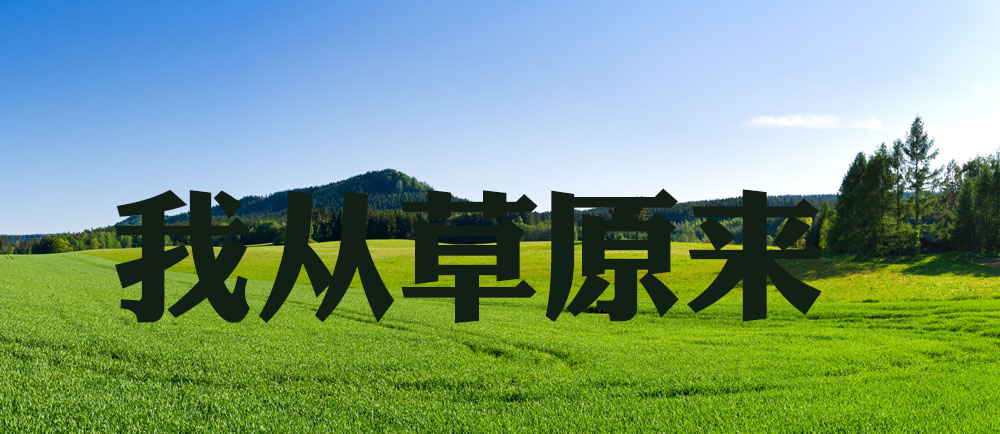
<style>
.page{position:relative;width:1000px;height:434px}
.page>*{position:absolute;margin:0}
.t1{font:143px "DFPLiJinHeiW8";color:#121f15}
</style>
<div class="page">
<p class="t1" style="left:114px;top:188px;width:709px;height:136px">我从草原来</p>
</div>
